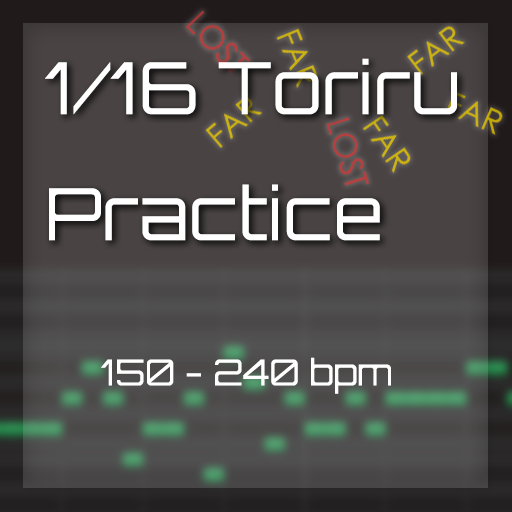
<style>
.page{position:relative;width:512px;height:512px}
.page>*{position:absolute;margin:0}
.t1{font:72px "Orbitron-Light";color:#ffffff}
.t2{font:36px "Orbitron-Light";color:#ffffff}
</style>
<div class="page">
<p class="t1" style="left:45px;top:58px;width:412px;height:183px">1/16 Toriru<br>Practice</p>
<p class="t2" style="left:101px;top:357px;width:290px;height:37px">150 - 240 bpm</p>
</div>
